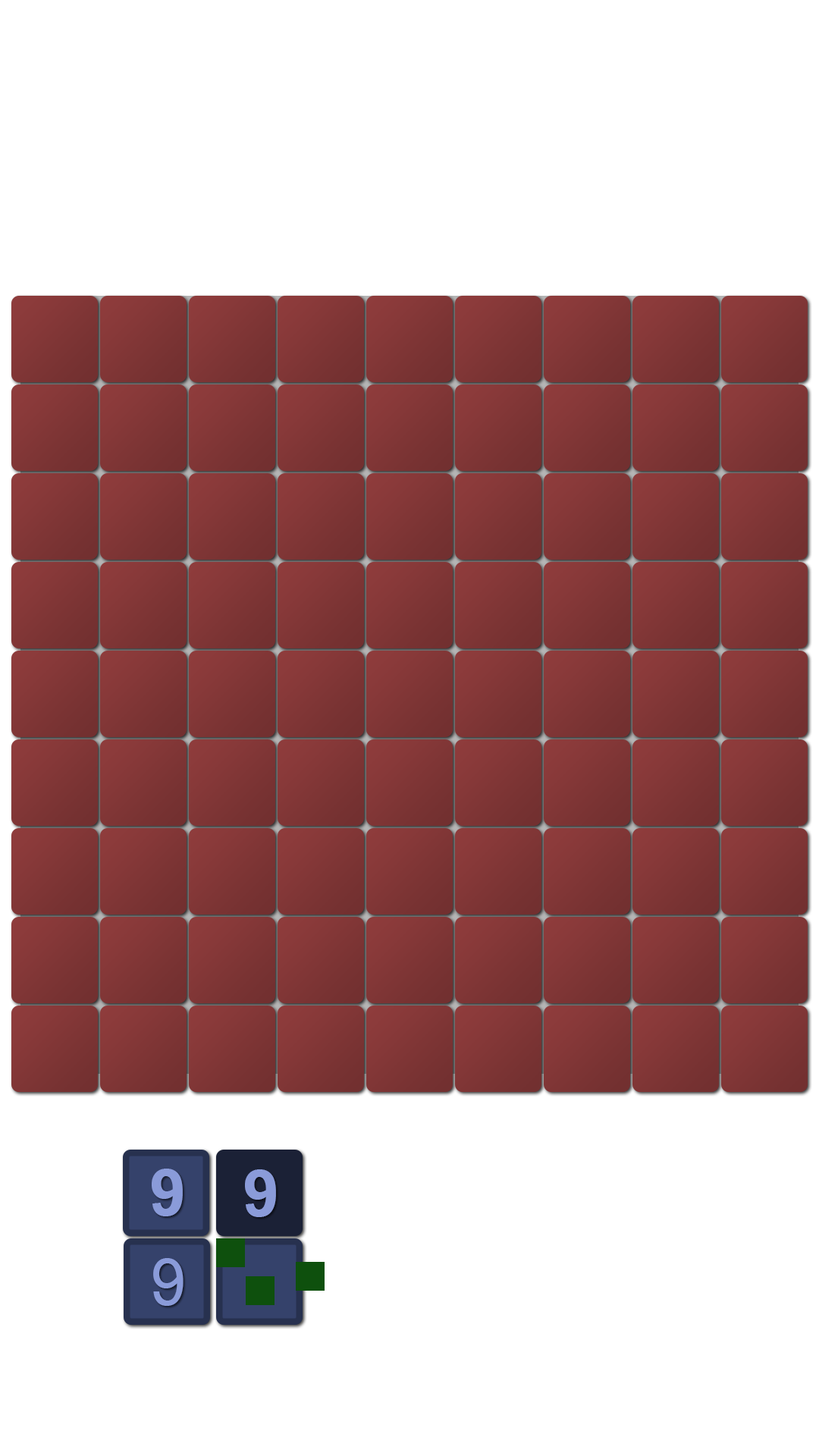
<style>
.page{position:relative;width:819px;height:1456px;background:#ffffff}
.page>*{position:absolute;margin:0}
.t1{font:68.2px "Rockwell-Bold";color:#8a9bd9}
.t2{font:68.2px "Rockwell";color:#8a9bd9}
</style>
<div class="page">
<p class="t1" style="left:152px;top:1169px;width:31px;height:47px">9</p>
<p class="t1" style="left:245px;top:1169px;width:31px;height:48px">9</p>
<p class="t2" style="left:153px;top:1258px;width:31px;height:48px">9</p>
</div>
